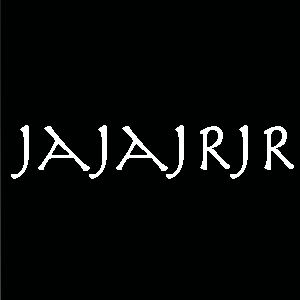
<style>
.page{position:relative;width:300px;height:300px;background:#000101}
.page>*{position:absolute;margin:0}
.t1{font:72px "Herculanum";color:#ffffff}
</style>
<div class="page">
<p class="t1" style="left:11px;top:125px;width:283px;height:54px">JaJaJRJR</p>
</div>
